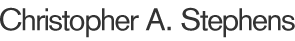
<style>
.page{position:relative;width:295px;height:41px;background:#ffffff}
.page>*{position:absolute;margin:0}
.t1{font:31px "AkzidenzGrotesk-Roman";letter-spacing:-0.04em;color:#333333}
</style>
<div class="page">
<p class="t1" style="left:0px;top:7px;width:295px;height:31px">Christopher A. Stephens</p>
</div>
